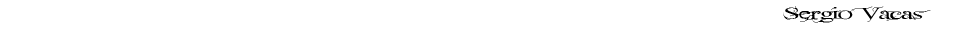
<style>
.page{position:relative;width:970px;height:30px;background:#ffffff}
.page>*{position:absolute;margin:0}
.t1{font:17px "FairydustB";color:#000000;scale:1.7 1}
</style>
<div class="page">
<p class="t1" style="left:783px;top:6px;width:148px;height:17px">Sergio Vacas</p>
</div>
